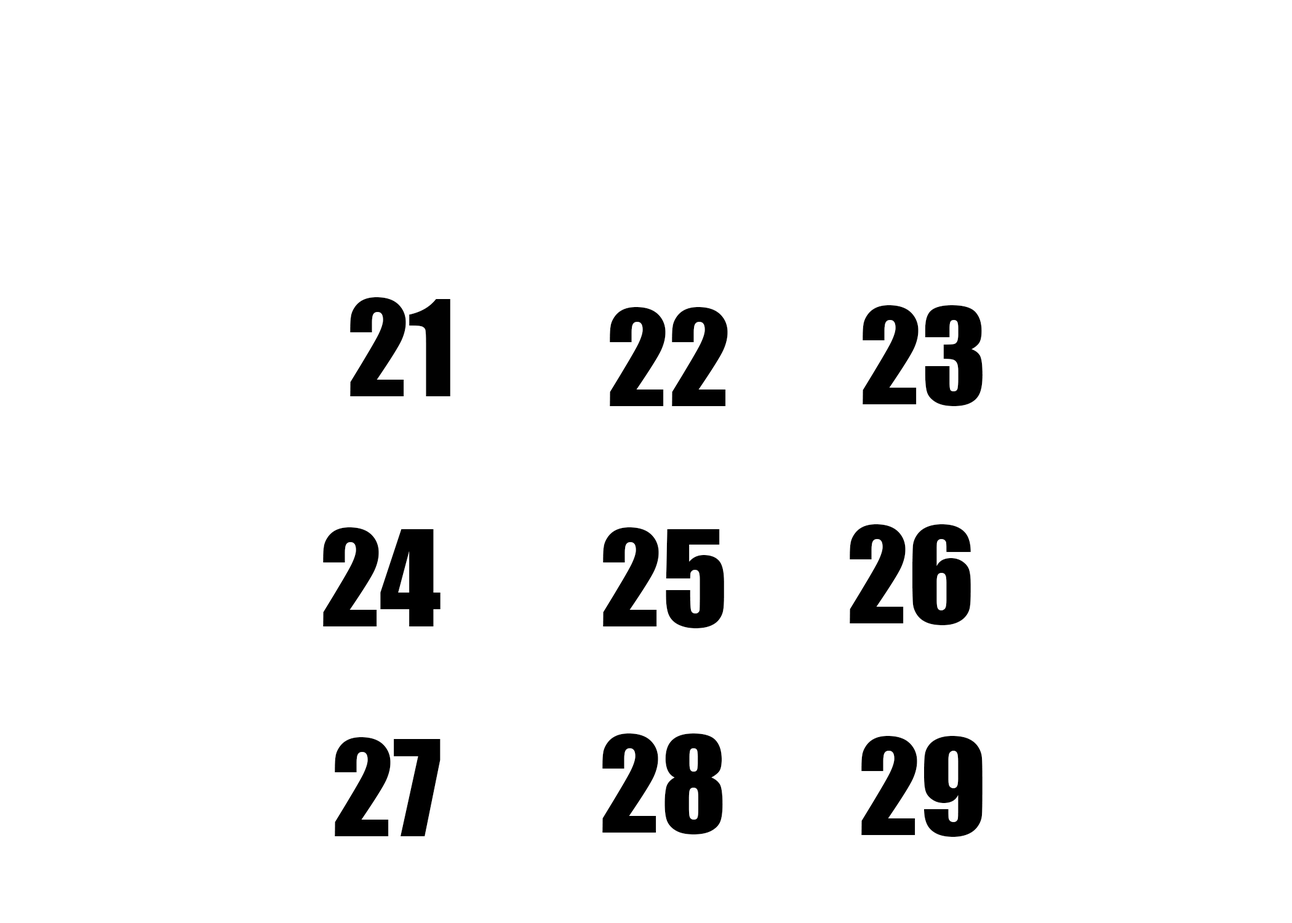
<style>
.page{position:relative;width:1292px;height:923px;background:#ffffff}
.page>*{position:absolute;margin:0}
.t1{font:123.1px "Impact";color:#010101}
.t2{font:123.1px "Impact";color:#000000}
</style>
<div class="page">
<p class="t1" style="left:350px;top:297px;width:100px;height:99px">21</p>
<p class="t2" style="left:863px;top:305px;width:120px;height:101px">23</p>
<p class="t2" style="left:610px;top:307px;width:118px;height:99px">22</p>
<p class="t2" style="left:323px;top:527px;width:118px;height:99px">24</p>
<p class="t2" style="left:603px;top:527px;width:121px;height:101px">25</p>
<p class="t2" style="left:850px;top:524px;width:121px;height:101px">26</p>
<p class="t2" style="left:335px;top:737px;width:106px;height:99px">27</p>
<p class="t2" style="left:602px;top:733px;width:121px;height:101px">28</p>
<p class="t2" style="left:861px;top:736px;width:122px;height:101px">29</p>
</div>
